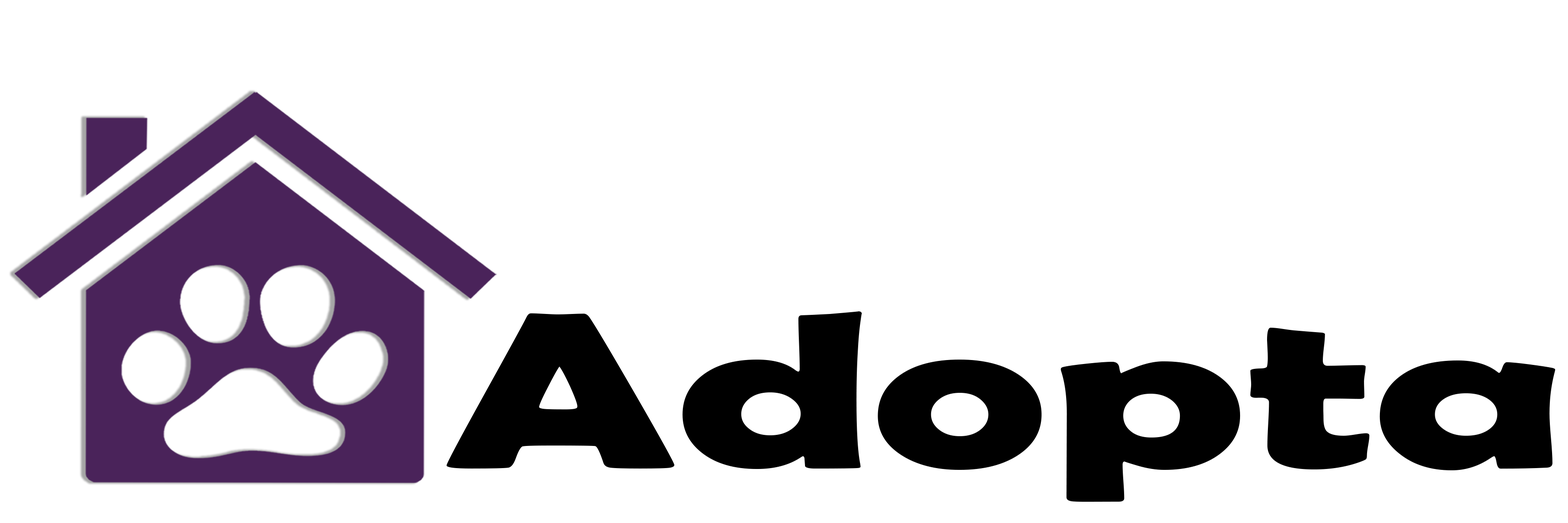
<style>
.page{position:relative;width:1568px;height:523px;background:#ffffff}
.page>*{position:absolute;margin:0}
.t1{font:221.3px "BerlinSansFBDemi-Bold";color:#000000;scale:1.5 1}
</style>
<div class="page">
<p class="t1" style="left:447px;top:311px;width:1108px;height:190px">Adopta</p>
</div>
